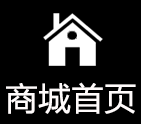
<style>
.page{position:relative;width:141px;height:124px;background:#000000}
.page>*{position:absolute;margin:0}
.t1{font:33px "FZLTHJW--GB1-0";color:#fffbfb}
</style>
<div class="page">
<p class="t1" style="left:6px;top:82px;width:130px;height:32px">商城首页</p>
</div>
